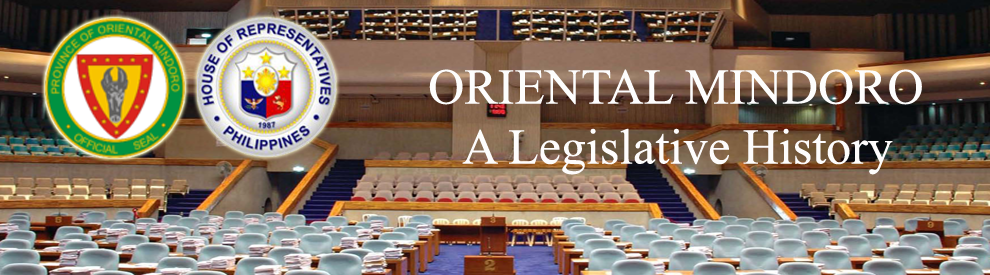
<style>
.page{position:relative;width:990px;height:275px}
.page>*{position:absolute;margin:0}
.t1{font:50px "TimesNewRomanPSMT";color:#fdfcfc}
.t2{font:50px "TimesNewRomanPSMT";color:#fdfdfd}
</style>
<div class="page">
<p class="t1" style="left:429px;top:69px;width:493px;height:106px;text-align:center"><span class="t2">ORIENTAL MINDORO<br></span>A Legislative History</p>
</div>
